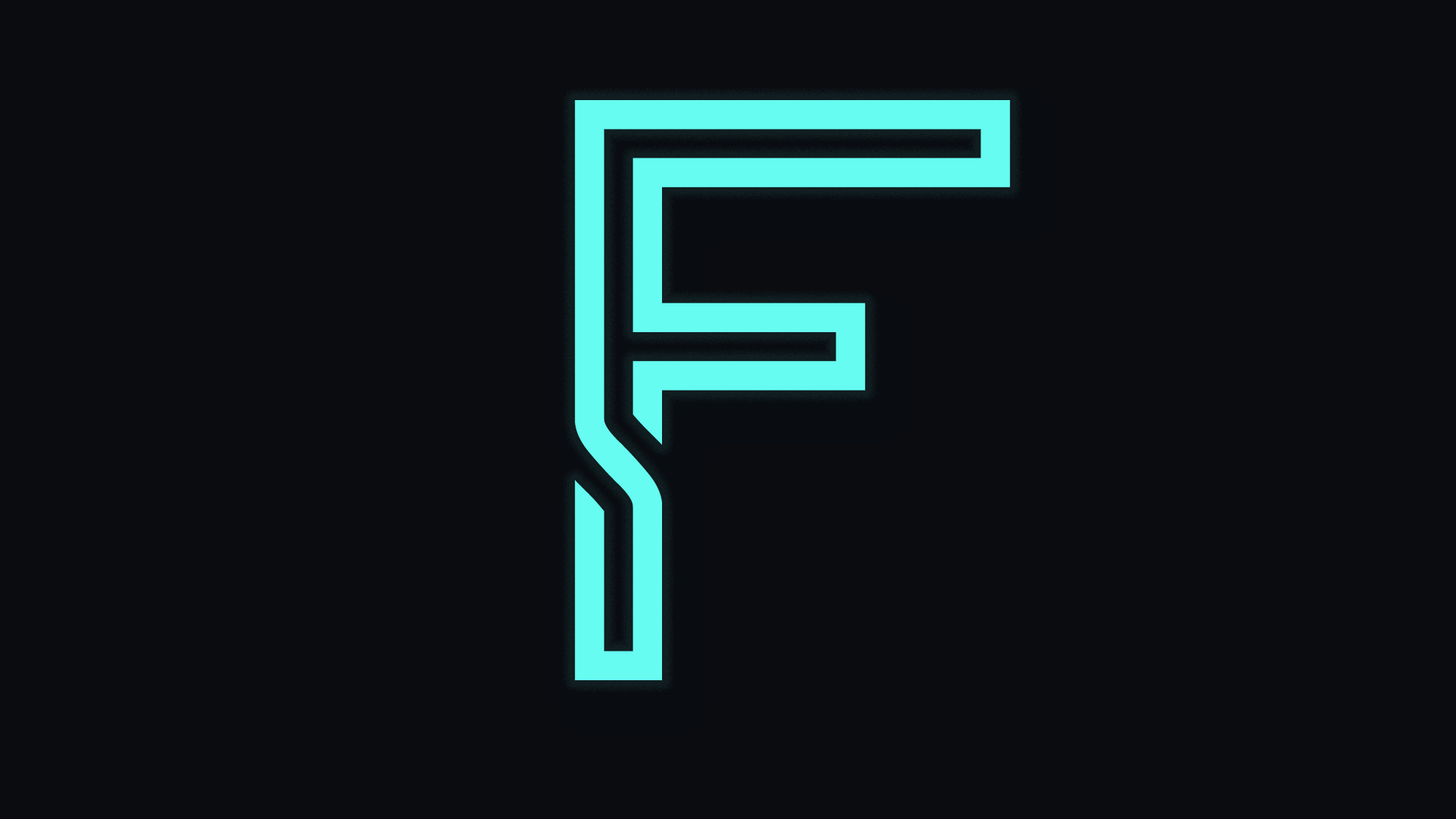
<style>
.page{position:relative;width:1456px;height:819px;background:#0b0c10}
.page>*{position:absolute;margin:0}
.t1{font:696.1px "Sportrop-Regular";letter-spacing:0.1em;color:#66fcf1}
</style>
<div class="page">
<p class="t1" style="left:575px;top:100px;width:435px;height:580px">F</p>
</div>
